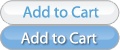
<style>
.page{position:relative;width:120px;height:50px}
.page>*{position:absolute;margin:0}
.t1{font:16px "MyriadPro-Regular";color:#56a5d8}
.t2{font:16px "MyriadPro-Regular";color:#ffffff}
</style>
<div class="page">
<p class="t1" style="left:23px;top:5px;width:76px;height:13px">Add to Cart</p>
<p class="t2" style="left:21px;top:31px;width:76px;height:13px">Add to Cart</p>
</div>
